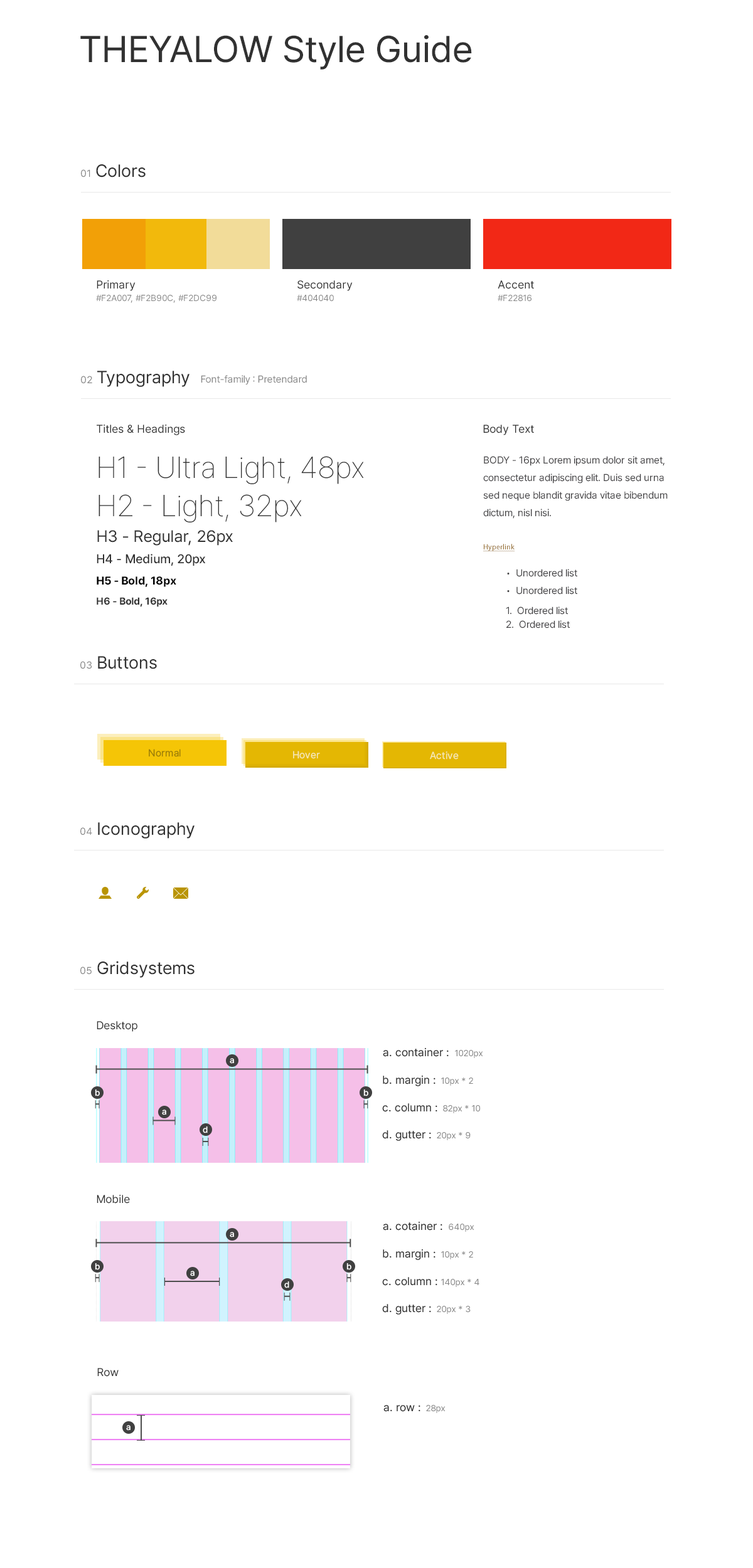
<style>
.page{position:relative;width:753px;height:1568px;background:#ffffff}
.page>*{position:absolute;margin:0}
.t1{font:37px "Pretendard-Regular";color:#313131}
.t2{font:17.6px "Pretendard-Regular";color:#313131}
.t3{font:10px "Pretendard-Regular";color:#888888}
.t4{font:8.8px/12.5px "Pretendard-Regular";color:#888888}
.t5{font:11.3px "Pretendard-Regular";color:#313131}
.t6{font:30.1px "Pretendard-Thin";color:#313131}
.t7{font:10px/17.6px "Pretendard-Regular";color:#414042}
.t8{font:16.3px "Pretendard-Regular";color:#313131}
.t9{font:7.5px "MyriadPro-Regular";color:#906829;text-decoration:underline}
.t10{font:12.5px "Pretendard-Medium";color:#313131}
.t11{font:11.3px "Pretendard-Bold";color:#000000}
.t12{font:10px "Pretendard-Bold";color:#313131}
.t13{font:10px/13.8px "Pretendard-Regular";color:#414042}
.t14{font:10px "Pretendard-Regular";letter-spacing:0.01em;color:#9b7d08}
.t15{font:10px "Pretendard-Regular";letter-spacing:0.01em;color:#f5e8b4}
.t16{font:8.8px "Pretendard-Regular";color:#888888}
</style>
<div class="page">
<p class="t1" style="left:80px;top:35px;width:392px;height:35px">THEYALOW Style Guide</p>
<p class="t2" style="left:81px;top:164px;width:65px;height:13px"><span class="t3">01 </span>Colors</p>
<p class="t4" style="left:96px;top:280px;width:120px;height:23px"><span class="t5">Primary<br></span>#F2A007, #F2B90C, #F2DC99</p>
<p class="t5" style="left:297px;top:280px;width:55px;height:22px">Secondary<br><span class="t4">#404040</span></p>
<p class="t4" style="left:497px;top:280px;width:37px;height:22px"><span class="t5">Accent<br></span>#F22816</p>
<p class="t2" style="left:81px;top:371px;width:108px;height:16px"><span class="t3">02 </span>Typography</p>
<p class="t3" style="left:201px;top:375px;width:106px;height:10px">Font-family : Pretendard</p>
<p class="t5" style="left:97px;top:424px;width:88px;height:11px">Titles &amp; Headings</p>
<p class="t5" style="left:483px;top:425px;width:51px;height:10px">Body Text</p>
<p class="t6" style="left:98px;top:456px;width:266px;height:28px">H1 - Ultra Light, 48px</p>
<p class="t7" style="left:483px;top:456px;width:184px;height:63px">BODY - 16px Lorem ipsum dolor sit amet, consectetur adipiscing elit. Duis sed urna sed neque blandit gravida vitae bibendum dictum, nisl nisi.</p>
<p class="t6" style="left:98px;top:494px;width:204px;height:28px">H2 - Light, 32px</p>
<p class="t8" style="left:97px;top:530px;width:136px;height:16px">H3 - Regular, 26px</p>
<p class="t9" style="left:483px;top:544px;width:32px;height:7px">Hyperlink</p>
<p class="t10" style="left:97px;top:554px;width:109px;height:12px">H4 - Medium, 20px</p>
<p class="t7" style="left:507px;top:569px;width:70px;height:26px">•  Unordered list<br> •  Unordered list</p>
<p class="t11" style="left:97px;top:576px;width:79px;height:11px">H5 - Bold, 18px</p>
<p class="t12" style="left:97px;top:597px;width:70px;height:10px">H6 - Bold, 16px</p>
<p class="t13" style="left:506px;top:607px;width:63px;height:21px">1.  Ordered list<br> 2.  Ordered list</p>
<p class="t2" style="left:80px;top:656px;width:77px;height:13px"><span class="t3">03 </span>Buttons</p>
<p class="t14" style="left:149px;top:749px;width:32px;height:8px">Normal</p>
<p class="t15" style="left:293px;top:751px;width:27px;height:8px">Hover</p>
<p class="t15" style="left:430px;top:751px;width:28px;height:9px">Active</p>
<p class="t2" style="left:80px;top:822px;width:114px;height:17px"><span class="t3">04 </span>Iconography</p>
<p class="t2" style="left:80px;top:961px;width:114px;height:17px"><span class="t3">05 </span>Gridsystems</p>
<p class="t5" style="left:97px;top:1021px;width:40px;height:11px">Desktop</p>
<p class="t5" style="left:383px;top:1047px;width:65px;height:10px">a. container :</p>
<p class="t16" style="left:455px;top:1050px;width:28px;height:8px">1020px</p>
<p class="t5" style="left:383px;top:1075px;width:52px;height:11px">b. margin :</p>
<p class="t16" style="left:441px;top:1078px;width:32px;height:8px">10px * 2</p>
<p class="t5" style="left:382px;top:1103px;width:55px;height:9px">c. column :</p>
<p class="t16" style="left:443px;top:1105px;width:37px;height:8px">82px * 10</p>
<p class="t5" style="left:382px;top:1130px;width:49px;height:11px">d. gutter :</p>
<p class="t16" style="left:437px;top:1132px;width:33px;height:8px">20px * 9</p>
<p class="t5" style="left:97px;top:1194px;width:33px;height:10px">Mobile</p>
<p class="t5" style="left:383px;top:1221px;width:59px;height:10px">a. cotainer :</p>
<p class="t16" style="left:448px;top:1224px;width:26px;height:8px">640px</p>
<p class="t5" style="left:383px;top:1249px;width:52px;height:11px">b. margin :</p>
<p class="t16" style="left:441px;top:1251px;width:32px;height:8px">10px * 2</p>
<p class="t5" style="left:382px;top:1277px;width:55px;height:9px">c. column :</p>
<p class="t16" style="left:441px;top:1279px;width:38px;height:8px">140px * 4</p>
<p class="t5" style="left:382px;top:1304px;width:49px;height:11px">d. gutter :</p>
<p class="t16" style="left:437px;top:1306px;width:33px;height:8px">20px * 3</p>
<p class="t5" style="left:97px;top:1368px;width:22px;height:9px">Row</p>
<p class="t5" style="left:383px;top:1405px;width:37px;height:7px">a. row :</p>
<p class="t16" style="left:426px;top:1405px;width:19px;height:8px">28px</p>
</div>
